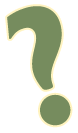
<style>
.page{position:relative;width:78px;height:133px;background:#ffffff}
.page>*{position:absolute;margin:0}
.t1{font:173.2px "GillSans-Bold";color:#768c5e}
</style>
<div class="page">
<p class="t1" style="left:7px;top:6px;width:64px;height:120px;rotate:-17deg">?</p>
</div>
